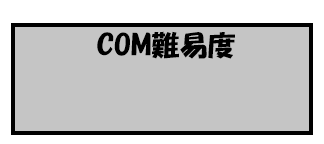
<style>
.page{position:relative;width:324px;height:144px;background:#c5c5c5}
.page>*{position:absolute;margin:0}
.t1{font:28px "HGPSoeiKakupoptai";color:#000000}
</style>
<div class="page">
<p class="t1" style="left:97px;top:31px;width:138px;height:28px">COM難易度</p>
</div>
